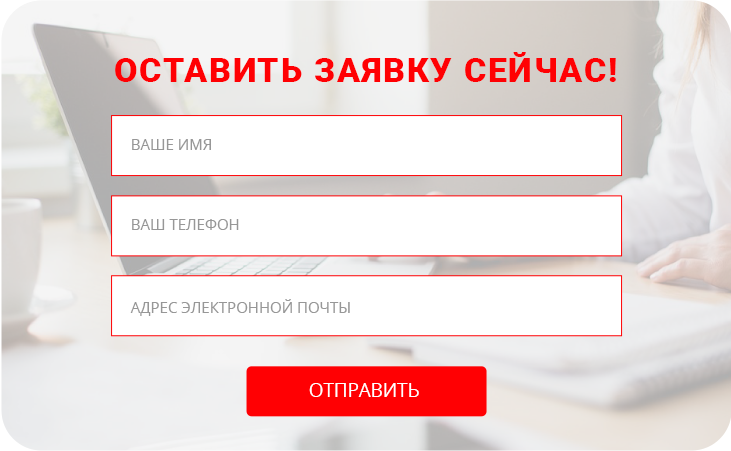
<style>
.page{position:relative;width:731px;height:451px;background:#ffffff}
.page>*{position:absolute;margin:0}
.t1{font:34px "Roboto-Black";letter-spacing:0.05em;color:#ff0003;text-transform:uppercase}
.t2{font:15px "OpenSans";color:#979797}
.t3{font:18.8px "OpenSans";color:#ffffff}
</style>
<div class="page">
<p class="t1" style="left:115px;top:52px;width:501px;height:30px">Оставить заявку сейчас!</p>
<p class="t2" style="left:132px;top:139px;width:79px;height:11px">ВАШЕ ИМЯ</p>
<p class="t2" style="left:132px;top:219px;width:107px;height:11px">ВАШ ТЕЛЕФОН</p>
<p class="t2" style="left:130px;top:299px;width:220px;height:17px">АДРЕС ЭЛЕКТРОННОЙ ПОЧТЫ</p>
<p class="t3" style="left:309px;top:383px;width:110px;height:14px">ОТПРАВИТЬ</p>
</div>
